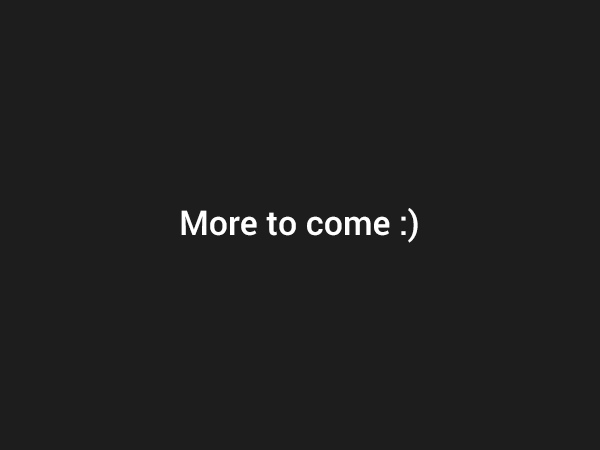
<style>
.page{position:relative;width:600px;height:450px;background:#1d1d1d}
.page>*{position:absolute;margin:0}
.t1{font:34px "Roboto-Medium";color:#ffffff}
</style>
<div class="page">
<p class="t1" style="left:181px;top:208px;width:237px;height:35px">More to come :)</p>
</div>
